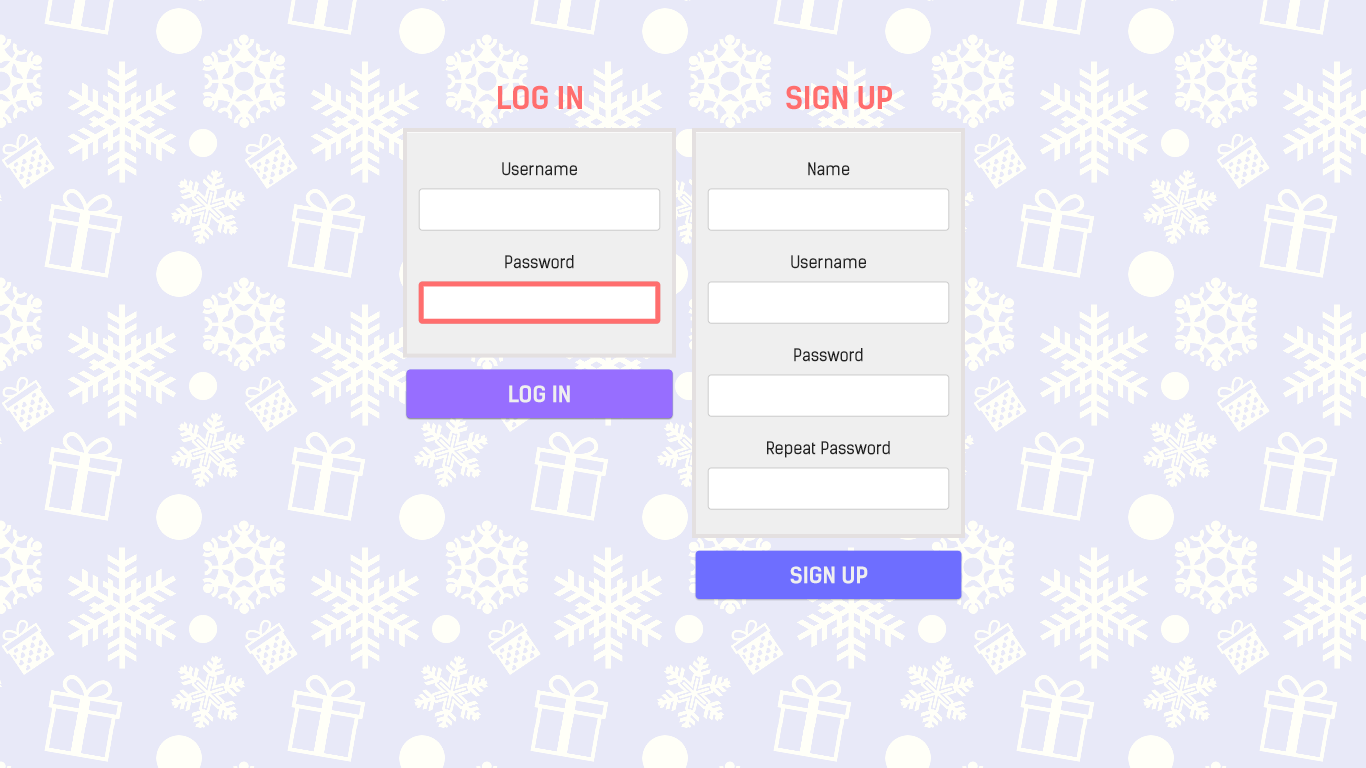
<style>
.page{position:relative;width:1366px;height:768px;background:#e8e9f8}
.page>*{position:absolute;margin:0}
.t1{font:30px "KelsonSans-Bold";color:#ff6e6e}
.t2{font:16.9px "KelsonSans-Regular";color:#232323}
.t3{font:21.8px "KelsonSans-Bold";color:#efefef}
</style>
<div class="page">
<p class="t1" style="left:498px;top:85px;width:84px;height:25px">LOG IN</p>
<p class="t1" style="left:786px;top:85px;width:106px;height:25px">SIGN UP</p>
<p class="t2" style="left:502px;top:162px;width:75px;height:14px">Username</p>
<p class="t2" style="left:808px;top:162px;width:42px;height:14px">Name</p>
<p class="t2" style="left:505px;top:255px;width:69px;height:14px">Password</p>
<p class="t2" style="left:791px;top:255px;width:75px;height:14px">Username</p>
<p class="t2" style="left:794px;top:348px;width:69px;height:14px">Password</p>
<p class="t3" style="left:509px;top:385px;width:61px;height:18px">LOG IN</p>
<p class="t3" style="left:509px;top:385px;width:61px;height:18px">LOG IN</p>
<p class="t2" style="left:767px;top:441px;width:123px;height:17px">Repeat Password</p>
<p class="t3" style="left:790px;top:566px;width:78px;height:18px">SIGN UP</p>
</div>
